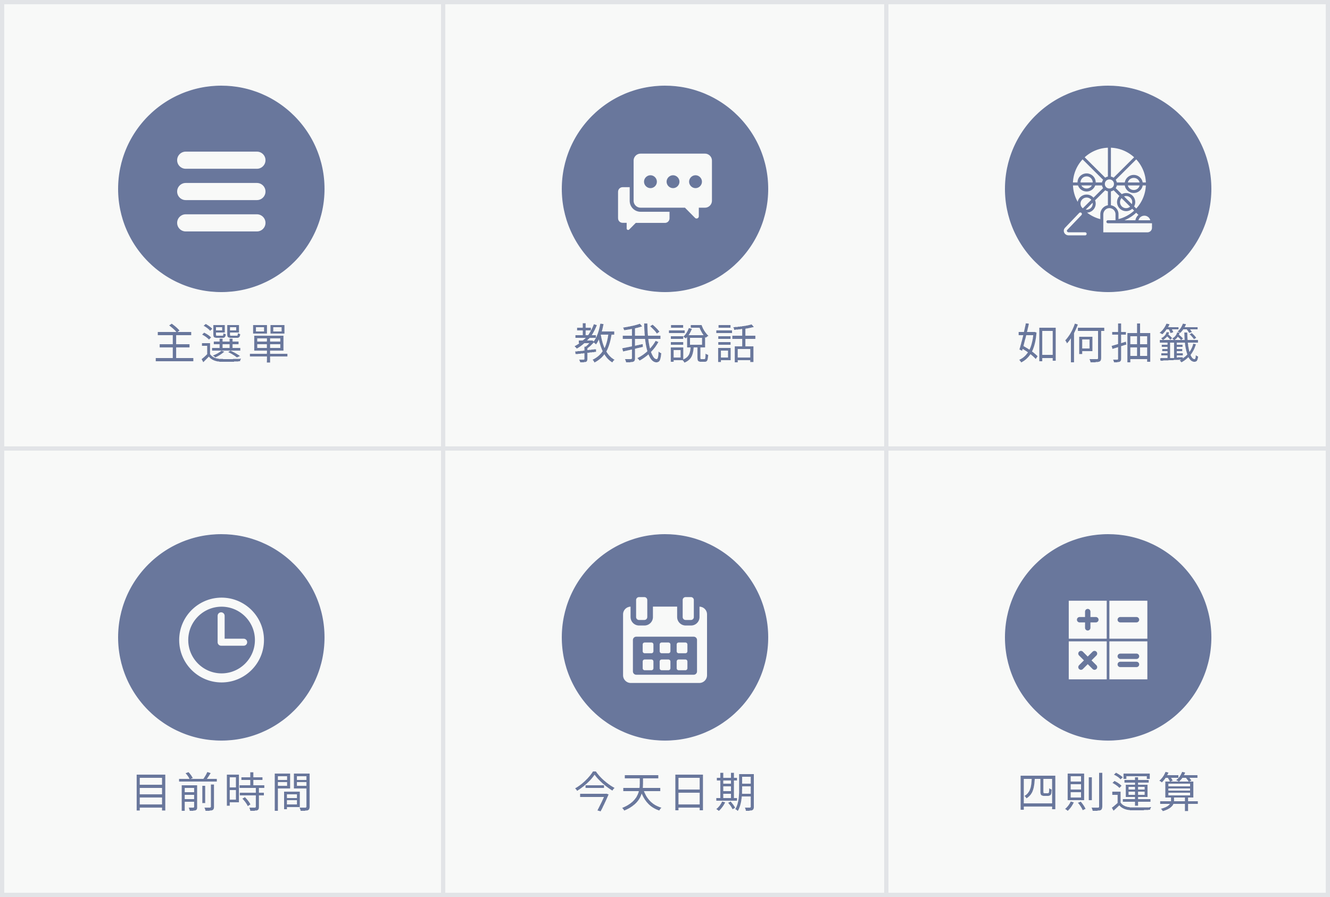
<style>
.page{position:relative;width:1330px;height:897px;background:#f8f9f8}
.page>*{position:absolute;margin:0}
.t1{font:42.6px "TaipeiSansTCBeta-Regular";letter-spacing:0.1em;color:#69779c}
</style>
<div class="page">
<p class="t1" style="left:155px;top:323px;width:133px;height:40px">主選單</p>
<p class="t1" style="left:574px;top:323px;width:181px;height:40px">教我說話</p>
<p class="t1" style="left:1018px;top:323px;width:180px;height:40px">如何抽籤</p>
<p class="t1" style="left:136px;top:772px;width:174px;height:39px">目前時間</p>
<p class="t1" style="left:575px;top:771px;width:179px;height:40px">今天日期</p>
<p class="t1" style="left:1020px;top:771px;width:178px;height:40px">四則運算</p>
</div>
